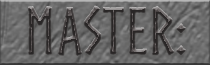
<style>
.page{position:relative;width:210px;height:65px}
.page>*{position:absolute;margin:0}
.t1{font:65px "Norse-Bold"}
</style>
<div class="page">
<p class="t1" style="left:28px;top:5px;width:158px;height:51px">Master:</p>
</div>
